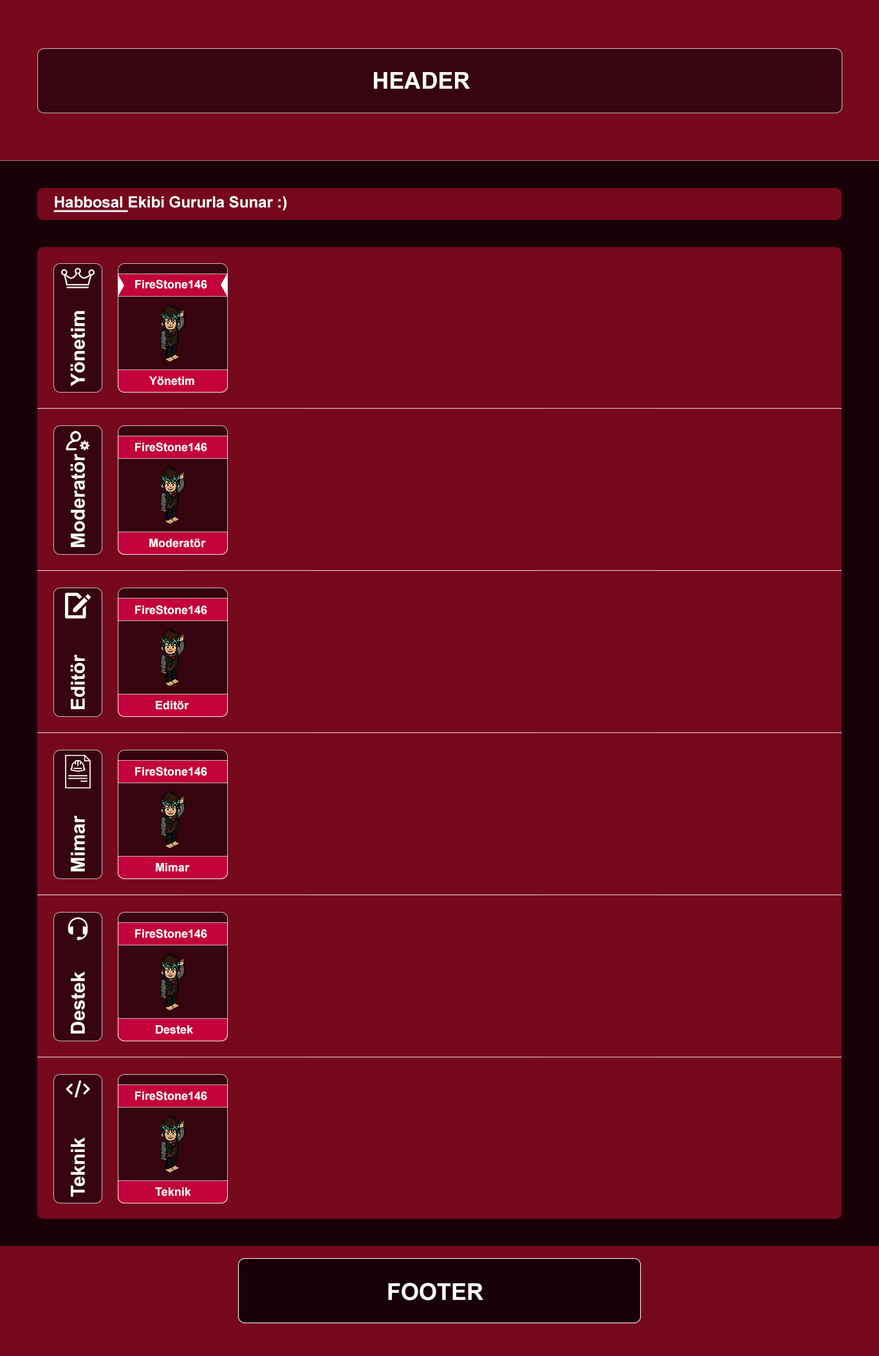
<style>
.page{position:relative;width:879px;height:1356px;background:#76081e}
.page>*{position:absolute;margin:0}
.t1{font:23.2px "Arial-BoldMT";color:#ffffff}
.t2{font:15.4px "Arial-BoldMT";color:#ffffff}
.t3{font:15.4px "Arial-BoldMT";color:#ffffff;text-decoration:underline}
.t4{font:11.6px "Arial-BoldMT";color:#ffffff}
.t5{font:19.3px "Arial-BoldMT";color:#ffffff}
</style>
<div class="page">
<p class="t1" style="left:374px;top:72px;width:96px;height:17px">HEADER</p>
<p class="t2" style="left:53px;top:196px;width:234px;height:16px"><span class="t3">Habbosal </span>Ekibi Gururla Sunar :)</p>
<p class="t4" style="left:135px;top:279px;width:72px;height:10px">FireStone146</p>
<p class="t5" style="left:70px;top:311px;width:15px;height:75px;rotate:-90deg">Yönetim</p>
<p class="t4" style="left:149px;top:377px;width:45px;height:9px">Yönetim</p>
<p class="t4" style="left:135px;top:442px;width:72px;height:10px">FireStone146</p>
<p class="t5" style="left:70px;top:454px;width:15px;height:93px;rotate:-90deg">Moderatör</p>
<p class="t4" style="left:149px;top:539px;width:57px;height:9px">Moderatör</p>
<p class="t4" style="left:135px;top:605px;width:72px;height:10px">FireStone146</p>
<p class="t5" style="left:70px;top:655px;width:15px;height:54px;rotate:-90deg">Editör</p>
<p class="t4" style="left:156px;top:701px;width:33px;height:9px">Editör</p>
<p class="t4" style="left:135px;top:767px;width:72px;height:9px">FireStone146</p>
<p class="t5" style="left:71px;top:816px;width:14px;height:56px;rotate:-90deg">Mimar</p>
<p class="t4" style="left:156px;top:863px;width:34px;height:9px">Mimar</p>
<p class="t4" style="left:135px;top:929px;width:72px;height:9px">FireStone146</p>
<p class="t5" style="left:71px;top:971px;width:14px;height:63px;rotate:-90deg">Destek</p>
<p class="t4" style="left:156px;top:1025px;width:37px;height:9px">Destek</p>
<p class="t4" style="left:135px;top:1091px;width:72px;height:10px">FireStone146</p>
<p class="t5" style="left:71px;top:1137px;width:14px;height:60px;rotate:-90deg">Teknik</p>
<p class="t4" style="left:155px;top:1188px;width:36px;height:9px">Teknik</p>
<p class="t1" style="left:388px;top:1283px;width:95px;height:18px">FOOTER</p>
</div>
